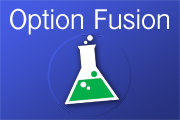
<style>
.page{position:relative;width:180px;height:120px}
.page>*{position:absolute;margin:0}
.t1{font:29.8px "InaiMathi";color:#ffffff}
</style>
<div class="page">
<p class="t1" style="left:10px;top:8px;width:159px;height:27px">Option Fusion</p>
</div>
